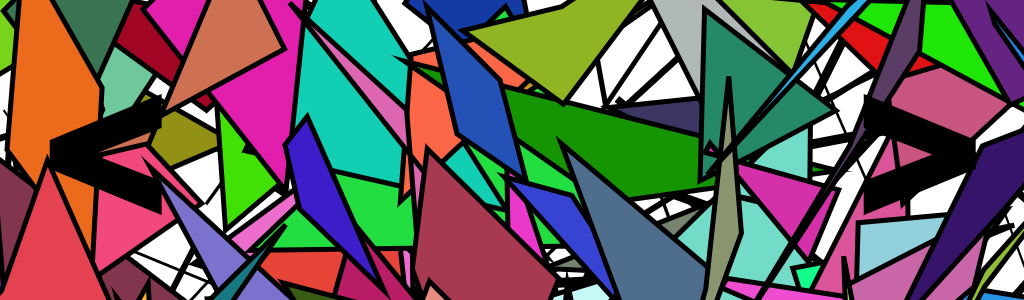
<style>
.page{position:relative;width:1024px;height:300px;background:#000000}
.page>*{position:absolute;margin:0}
.t1{font:200px "GillSans-UltraBold";color:#000000}
</style>
<div class="page">
<p class="t1" style="left:49px;top:93px;width:113px;height:123px">&lt;</p>
<p class="t1" style="left:863px;top:93px;width:113px;height:123px">&gt;</p>
</div>
